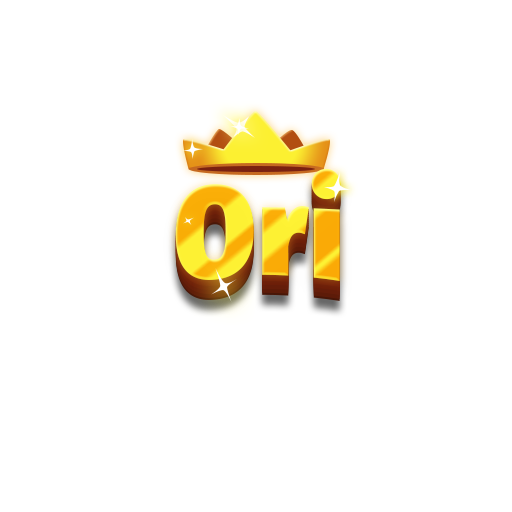
<style>
.page{position:relative;width:512px;height:512px;background:#ffffff}
.page>*{position:absolute;margin:0}
.t1{font:134.2px "FiraSans-Ultra";letter-spacing:0.025em;scale:0.87 1}
</style>
<div class="page">
<p class="t1" style="left:175px;top:168px;width:166px;height:113px">Ori</p>
</div>
